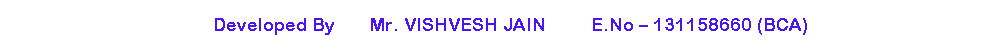
<style>
.page{position:relative;width:1000px;height:50px;background:#ffffff}
.page>*{position:absolute;margin:0}
.t1{font:18px "ArialRoundedMTBold";color:#4916f0}
</style>
<div class="page">
<p class="t1" style="left:215px;top:18px;width:592px;height:17px">Developed By       Mr. VISHVESH JAIN         E.No – 131158660 (BCA)</p>
</div>
